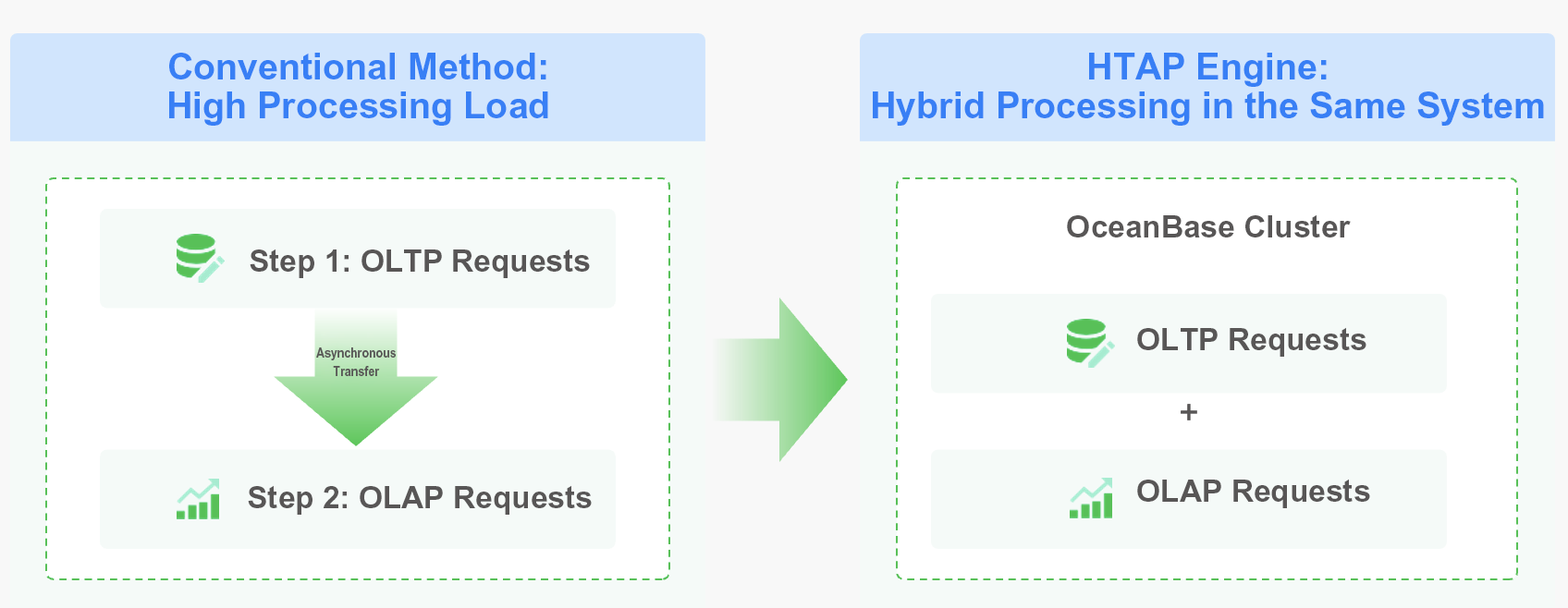
<style>
.page{position:relative;width:1568px;height:608px;background:#f5faf8}
.page>*{position:absolute;margin:0}
.t1{font:36.4px/38.6px "Arial-BoldMT";color:#387ff5}
.t2{font:30.9px "Arial-BoldMT";color:#585656}
.t3{font:14.2px/18.5px "Arial-BoldMT";color:#585656;scale:0.81 1}
</style>
<div class="page">
<p class="t1" style="left:169px;top:53px;width:379px;height:73px;text-align:center">Conventional Method:<br>High Processing Load</p>
<p class="t1" style="left:873px;top:53px;width:671px;height:73px;text-align:center">HTAP Engine:<br>Hybrid Processing in the Same System</p>
<p class="t2" style="left:1067px;top:214px;width:284px;height:24px">OceanBase Cluster</p>
<p class="t2" style="left:250px;top:249px;width:340px;height:29px">Step 1: OLTP Requests</p>
<p class="t2" style="left:1137px;top:327px;width:229px;height:30px">OLTP Requests</p>
<p class="t3" style="left:316px;top:348px;width:80px;height:28px;text-align:center">Asynchronous<br>Transfer</p>
<p class="t2" style="left:248px;top:485px;width:344px;height:30px">Step 2: OLAP Requests</p>
<p class="t2" style="left:1137px;top:479px;width:233px;height:29px">OLAP Requests</p>
</div>
